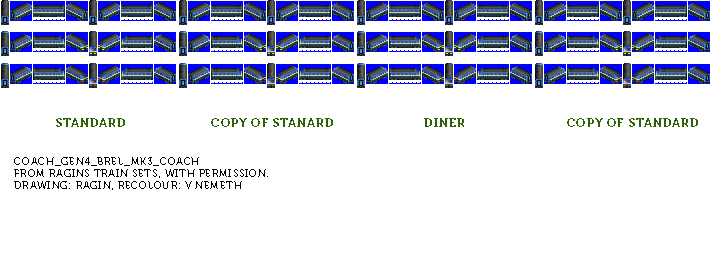
<style>
.page{position:relative;width:714px;height:257px;background:#ffffff}
.page>*{position:absolute;margin:0}
.t1{font:12px "Museo700-Regular";letter-spacing:0.075em;color:#306004;text-transform:uppercase}
.t2{font:10px "Museo700-Regular";letter-spacing:0.075em;color:#000000;text-transform:uppercase}
</style>
<div class="page">
<p class="t1" style="left:56px;top:118px;width:69px;height:9px">standard</p>
<p class="t1" style="left:211px;top:118px;width:122px;height:9px">copy of stanard</p>
<p class="t1" style="left:424px;top:118px;width:40px;height:9px">diner</p>
<p class="t1" style="left:567px;top:118px;width:131px;height:9px">copy of standard</p>
<p class="t2" style="left:14px;top:157px;width:254px;height:33px">Coach_Gen4_BREL_Mk3_Coach<br>From Ragins Train Sets, with permission.<br>Drawing: Ragin, recolour: V Nemeth</p>
</div>
